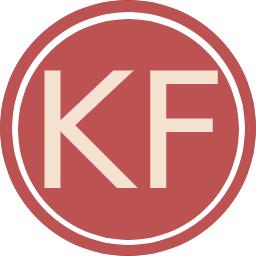
<style>
.page{position:relative;width:256px;height:256px;background:#bc5252}
.page>*{position:absolute;margin:0}
.t1{font:161.2px "DejaVuSans";color:#f6e2d0}
</style>
<div class="page">
<p class="t1" style="left:44px;top:70px;width:174px;height:118px">KF</p>
</div>
